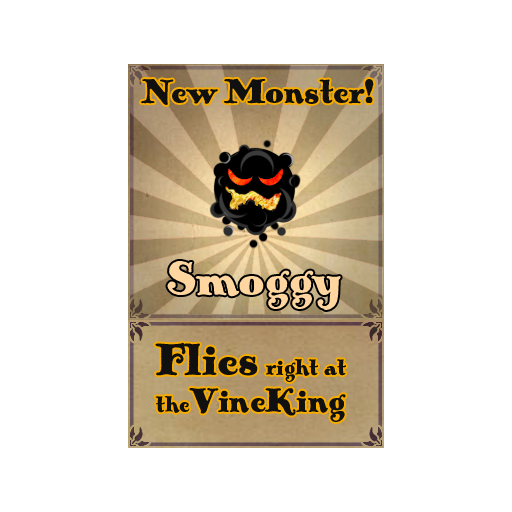
<style>
.page{position:relative;width:512px;height:512px;background:#ffffff}
.page>*{position:absolute;margin:0}
.t1{font:36px "PickworthOldStylePro";color:#101010}
.t2{font:50px "PickworthOldStylePro";color:#ffd6a0}
.t3{font:24px/30px "PickworthOldStylePro";color:#101010}
.t4{font:48px/30px "PickworthOldStylePro";color:#101010}
.t5{font:36px/30px "PickworthOldStylePro";color:#101010}
</style>
<div class="page">
<p class="t1" style="left:141px;top:78px;width:233px;height:27px">New Monster!</p>
<p class="t2" style="left:167px;top:261px;width:174px;height:49px">Smoggy</p>
<p class="t3" style="left:155px;top:342px;width:191px;height:80px"><span class="t4">Flies </span>right at<br>the<span class="t5">VineKing</span></p>
</div>
